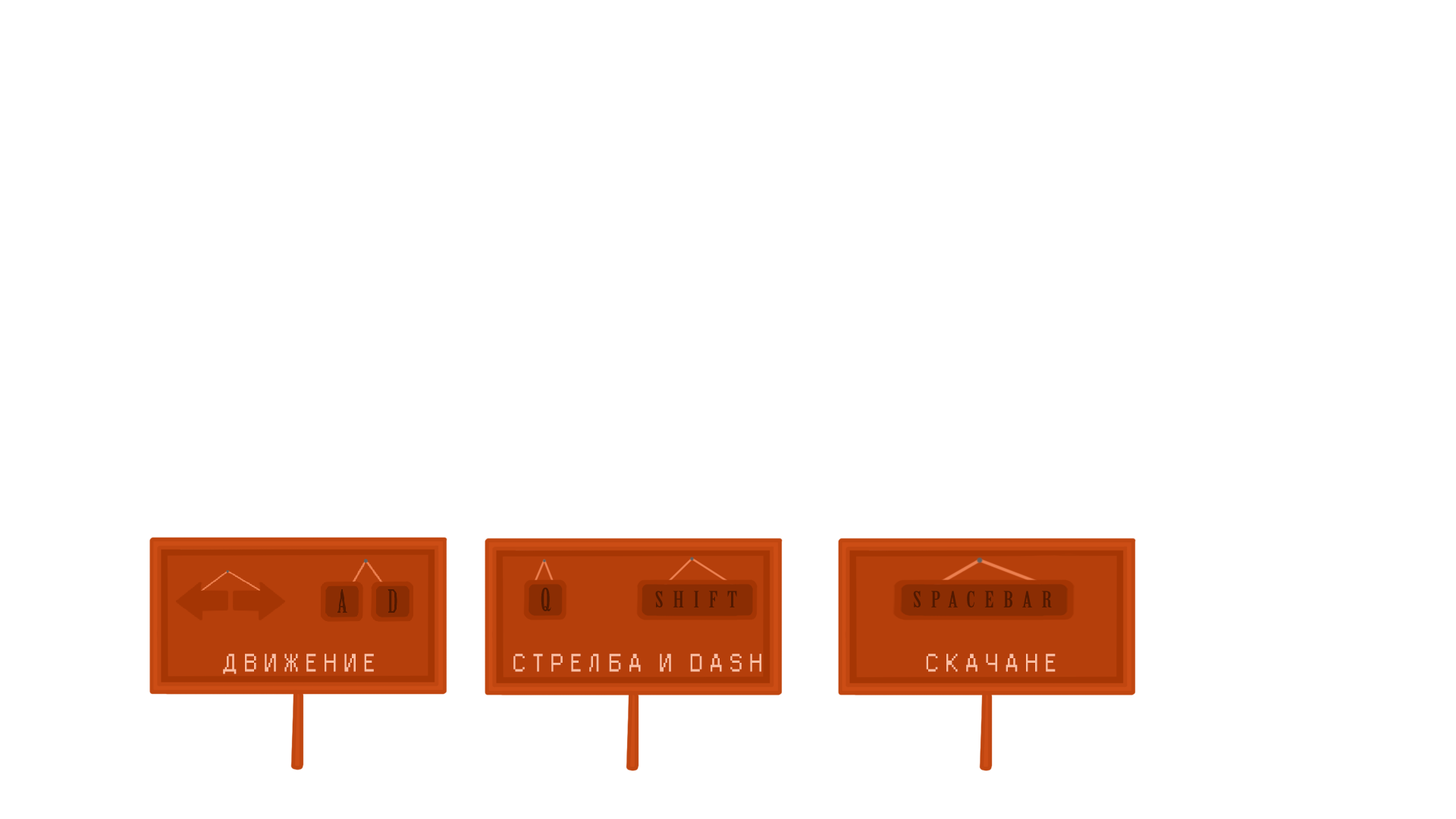
<style>
.page{position:relative;width:1456px;height:819px;background:#ffffff}
.page>*{position:absolute;margin:0}
.t1{font:31.5px "BirchStd";letter-spacing:0.3em;color:#511901}
.t2{font:21.9px "BirchStd";letter-spacing:0.3em;color:#511901;scale:1.4 1}
.t3{font:23.5px "Small Fonts";letter-spacing:0.3em;color:#fbbfa4}
</style>
<div class="page">
<p class="t1" style="left:541px;top:587px;width:10px;height:24px">Q</p>
<p class="t2" style="left:655px;top:591px;width:82px;height:16px">SHIFT</p>
<p class="t2" style="left:913px;top:591px;width:139px;height:16px">SPACEBAR</p>
<p class="t3" style="left:223px;top:654px;width:151px;height:20px">ДВИЖЕНИЕ</p>
<p class="t3" style="left:513px;top:654px;width:248px;height:18px">СТРЕЛБА И DASH</p>
<p class="t3" style="left:926px;top:654px;width:130px;height:18px">СКАЧАНЕ</p>
</div>
